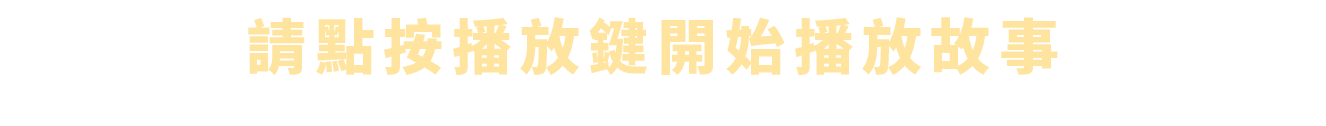
<style>
.page{position:relative;width:1326px;height:126px;background:#ffffff}
.page>*{position:absolute;margin:0}
.t1{font:60px "NotoSansCJKtc-Black";letter-spacing:0.14em;color:#ffe49f}
</style>
<div class="page">
<p class="t1" style="left:248px;top:17px;width:810px;height:59px">請點按播放鍵開始播放故事</p>
</div>
